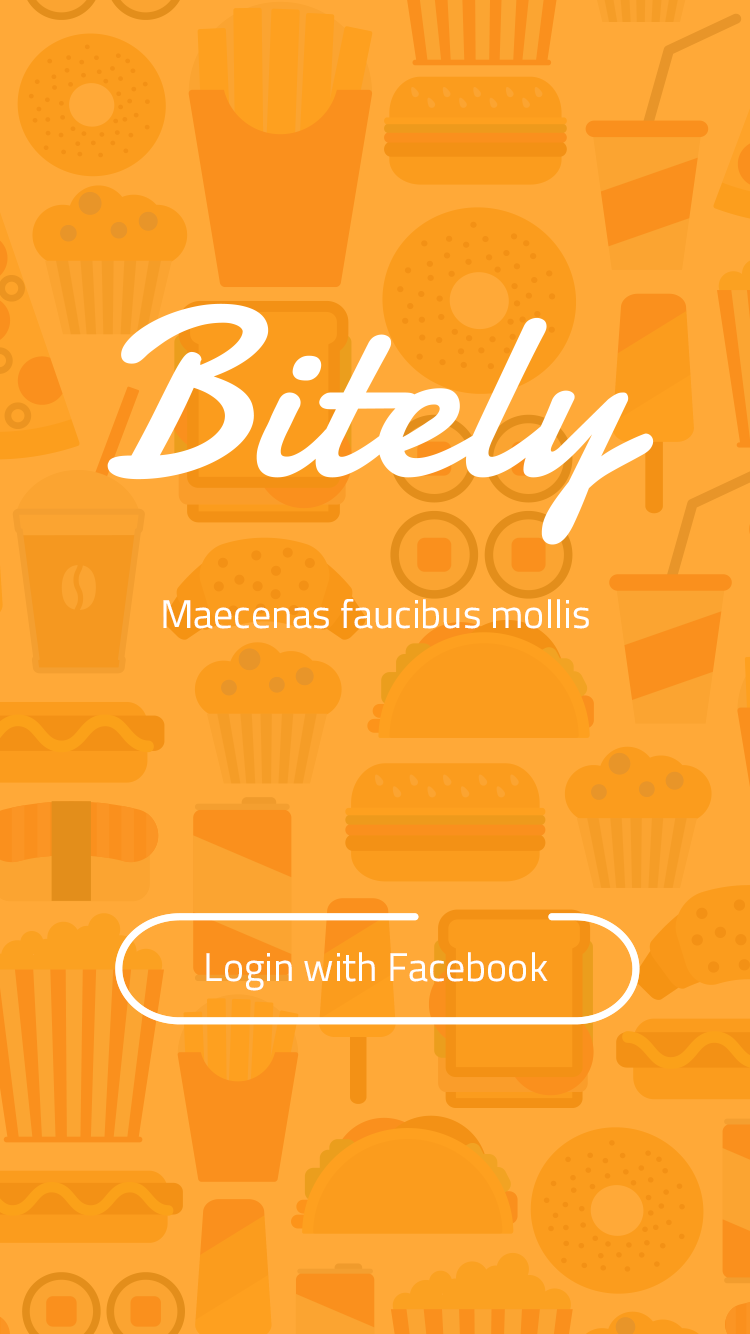
<style>
.page{position:relative;width:750px;height:1334px;background:#ffa938}
.page>*{position:absolute;margin:0}
.t1{font:40px "TitilliumWeb-Regular";color:#ffffff}
</style>
<div class="page">
<p class="t1" style="left:163px;top:599px;width:426px;height:30px">Maecenas faucibus mollis terdum.</p>
<p class="t1" style="left:206px;top:952px;width:342px;height:39px">Login with Facebook</p>
</div>
